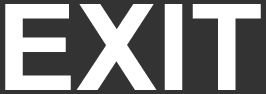
<style>
.page{position:relative;width:266px;height:94px;background:#333333}
.page>*{position:absolute;margin:0}
.t1{font:120px "Arial-BoldMT";color:#ffffff}
</style>
<div class="page">
<p class="t1" style="left:5px;top:4px;width:256px;height:86px">EXIT</p>
</div>
